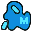
<style>
.page{position:relative;width:32px;height:32px;background:#ffffff}
.page>*{position:absolute;margin:0}
.t1{font:10px "Arial-BoldMT";color:#50e6ff;font-weight:bold}
</style>
<div class="page">
<p class="t1" style="left:20px;top:17px;width:8px;height:7px">M</p>
</div>
